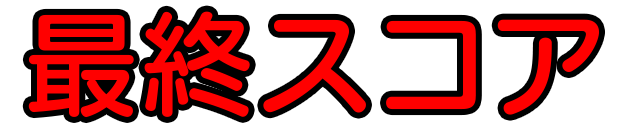
<style>
.page{position:relative;width:628px;height:128px;background:#ffffff}
.page>*{position:absolute;margin:0}
.t1{font:116.7px "SeuratProN-DB";color:#ff0000}
</style>
<div class="page">
<p class="t1" style="left:28px;top:11px;width:572px;height:107px">最終スコア</p>
</div>
